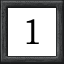
<style>
.page{position:relative;width:64px;height:64px;background:#ffffff}
.page>*{position:absolute;margin:0}
.t1{font:36px "BookmanOldStyle";color:#000000}
</style>
<div class="page">
<p class="t1" style="left:26px;top:19px;width:13px;height:25px">1</p>
</div>
